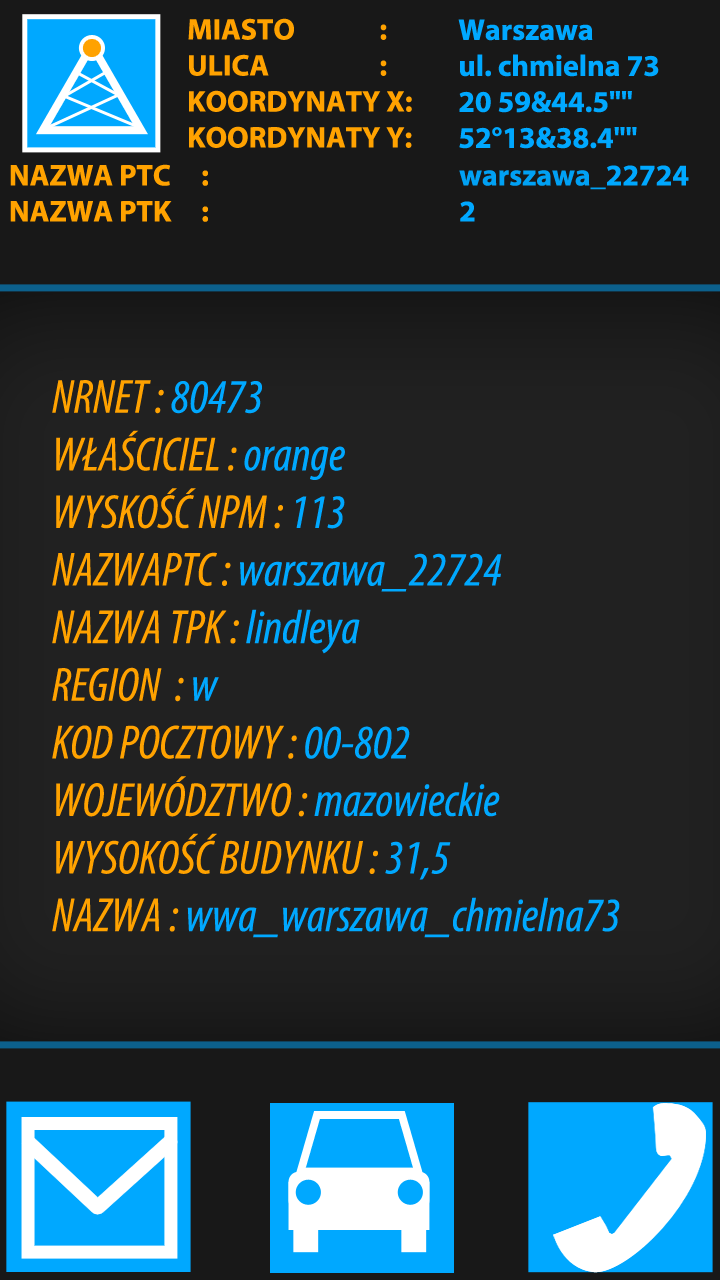
<style>
.page{position:relative;width:720px;height:1280px;background:#212121}
.page>*{position:absolute;margin:0}
.t1{font:30px "MyriadPro-Bold";color:#ffa200}
.t2{font:30px "MyriadPro-Bold";color:#00a8ff}
.t3{font:30px "MyriadPro-Bold";color:#01a1f4}
.t4{font:48px "MyriadPro-CondIt";color:#00a8ff}
.t5{font:48px "MyriadPro-CondIt";color:#ffa200}
</style>
<div class="page">
<p class="t1" style="left:188px;top:18px;width:224px;height:130px">MIASTO      :<br>ULICA      :<br>KOORDYNATY X:<br>KOORDYNATY Y:</p>
<p class="t2" style="left:458px;top:19px;width:201px;height:130px">Warszawa<br>ul. chmielna 73<br>20 59&amp;44.5""<br>52°13&amp;38.4""</p>
<p class="t1" style="left:10px;top:164px;width:679px;height:58px">NAZWA PTC   :           <span class="t3">warszawa_</span><span class="t2">22724<br></span>NAZWA PTK   :           <span class="t2">2</span></p>
<p class="t4" style="left:52px;top:380px;width:568px;height:558px"><span class="t5">NRNET : </span>80473<br><span class="t5">WŁAŚCICIEL : </span>orange<br><span class="t5">WYSKOŚĆ NPM : </span>113<br><span class="t5">NAZWAPTC : </span>warszawa_22724<br><span class="t5">NAZWA TPK : </span>lindleya<br><span class="t5">REGION  : </span>w<span class="t5"> <br>KOD POCZTOWY : </span>00-802<br><span class="t5">WOJEWÓDZTWO : </span>mazowieckie<br><span class="t5">WYSOKOŚĆ BUDYNKU : </span>31,5<br><span class="t5">NAZWA : </span>wwa_warszawa_chmielna73</p>
</div>
